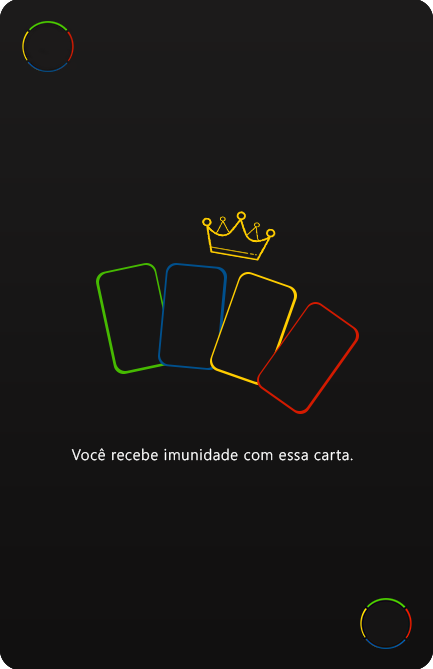
<style>
.page{position:relative;width:433px;height:669px}
.page>*{position:absolute;margin:0}
.t1{font:15.2px "NirmalaUI-Semilight";letter-spacing:0.05em;color:#ffffff}
</style>
<div class="page">
<p class="t1" style="left:71px;top:448px;width:282px;height:13px">Você recebe imunidade com essa carta.</p>
</div>
